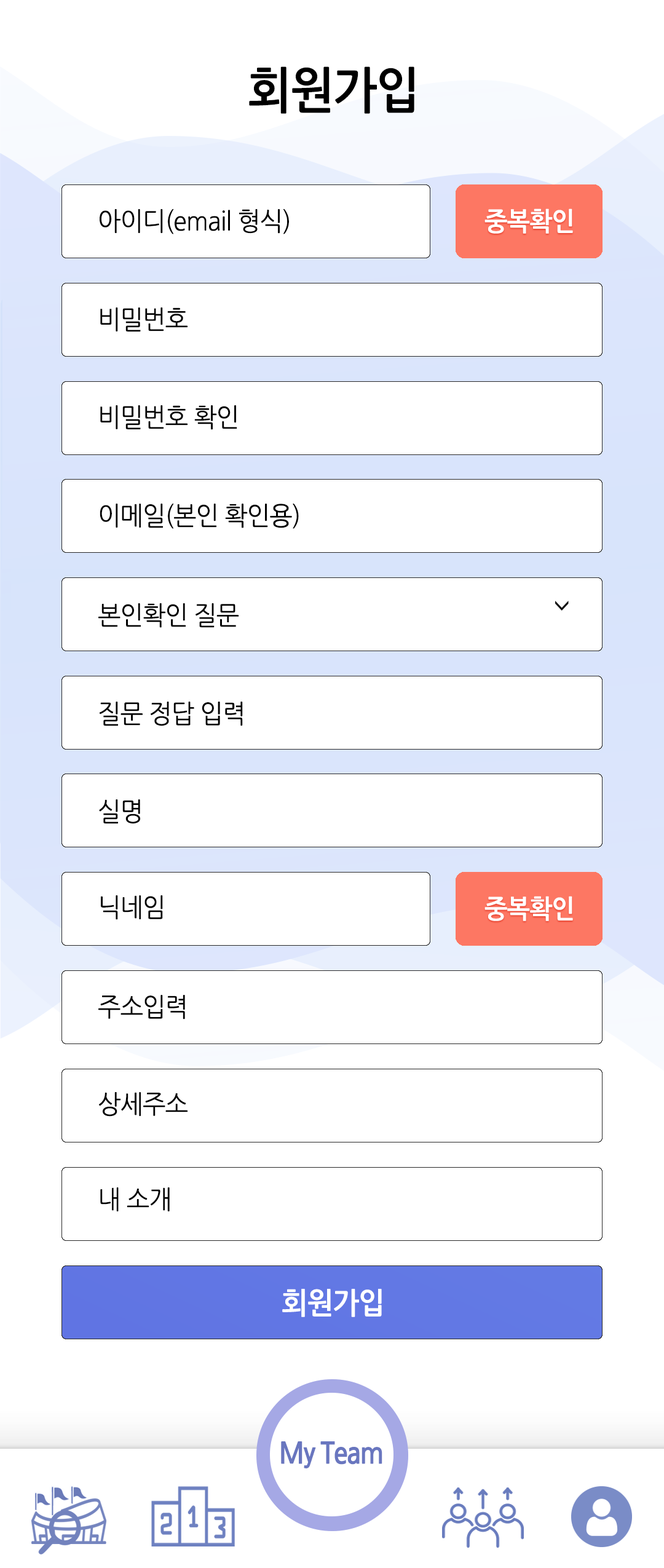
<style>
.page{position:relative;width:664px;height:1568px;background:#ffffff}
.page>*{position:absolute;margin:0}
.t1{font:49.2px "NanumGothicBold";letter-spacing:-0.025em;color:#000000;scale:0.95 1}
.t2{font:25.8px "NanumGothic";letter-spacing:-0.025em;color:#000000;scale:0.95 1}
.t3{font:25.8px "NanumGothicBold";letter-spacing:-0.025em;color:#ffffff;scale:0.95 1}
.t4{font:29.5px "NanumGothicBold";letter-spacing:-0.025em;color:#ffffff;scale:0.95 1}
</style>
<div class="page">
<p class="t1" style="left:249px;top:66px;width:165px;height:48px">회원가입</p>
<p class="t2" style="left:100px;top:209px;width:189px;height:25px">아이디(email 형식)</p>
<p class="t3" style="left:485px;top:208px;width:88px;height:26px">중복확인</p>
<p class="t2" style="left:100px;top:307px;width:88px;height:25px">비밀번호</p>
<p class="t2" style="left:100px;top:405px;width:137px;height:25px">비밀번호 확인</p>
<p class="t2" style="left:100px;top:504px;width:199px;height:25px">이메일(본인 확인용)</p>
<p class="t2" style="left:98px;top:603px;width:141px;height:25px">본인확인 질문</p>
<p class="t2" style="left:99px;top:702px;width:144px;height:24px">질문 정답 입력</p>
<p class="t2" style="left:99px;top:799px;width:41px;height:25px">실명</p>
<p class="t2" style="left:101px;top:895px;width:62px;height:25px">닉네임</p>
<p class="t3" style="left:485px;top:896px;width:88px;height:25px">중복확인</p>
<p class="t2" style="left:98px;top:995px;width:87px;height:25px">주소입력</p>
<p class="t2" style="left:99px;top:1092px;width:89px;height:25px">상세주소</p>
<p class="t2" style="left:100px;top:1187px;width:70px;height:24px">내 소개</p>
<p class="t4" style="left:282px;top:1289px;width:100px;height:28px">회원가입</p>
</div>
